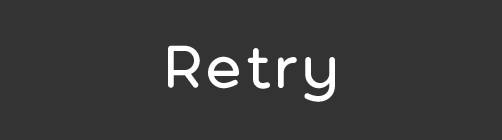
<style>
.page{position:relative;width:502px;height:140px;background:#333333}
.page>*{position:absolute;margin:0}
.t1{font:62.6px "PollyRounded-Regular";color:#ffffff}
</style>
<div class="page">
<p class="t1" style="left:168px;top:45px;width:167px;height:57px">Retry</p>
</div>
